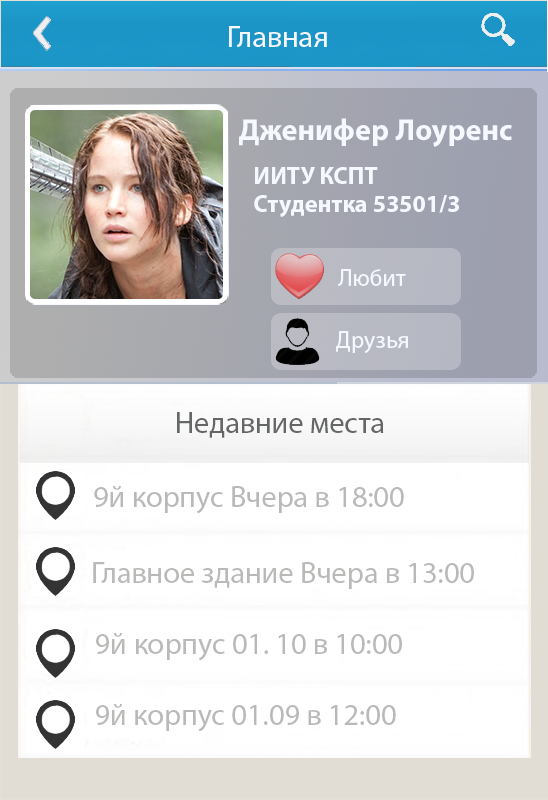
<style>
.page{position:relative;width:548px;height:800px;background:#ffffff}
.page>*{position:absolute;margin:0}
.t1{font:30.3px "MyriadPro-Regular";color:#f5f9ff}
.t2{font:30.3px "MyriadPro-Bold";color:#f5f9ff}
.t3{font:24px "MyriadPro-Bold";color:#f5f9ff}
.t4{font:24px "MyriadPro-Regular";color:#f5f9ff}
.t5{font:30.3px "MyriadPro-Regular";color:#656667}
.t6{font:30.3px "MyriadPro-Regular";color:#b9b9b7}
</style>
<div class="page">
<p class="t1" style="left:229px;top:26px;width:98px;height:21px">Главная</p>
<p class="t2" style="left:239px;top:118px;width:273px;height:29px">Дженифер Лоуренс</p>
<p class="t3" style="left:254px;top:167px;width:205px;height:50px">ИИТУ КСПТ <br>Студентка 53501/3</p>
<p class="t4" style="left:338px;top:269px;width:68px;height:17px">Любит</p>
<p class="t4" style="left:336px;top:331px;width:72px;height:22px">Друзья</p>
<p class="t5" style="left:177px;top:412px;width:207px;height:26px">Недавние места</p>
<p class="t6" style="left:94px;top:486px;width:310px;height:28px">9й корпус Вчера в 18:00</p>
<p class="t6" style="left:93px;top:562px;width:381px;height:27px">Главное здание Вчера в 13:00</p>
<p class="t6" style="left:96px;top:633px;width:306px;height:28px">9й корпус 01. 10 в 10:00</p>
<p class="t6" style="left:96px;top:704px;width:300px;height:28px">9й корпус 01.09 в 12:00</p>
</div>
